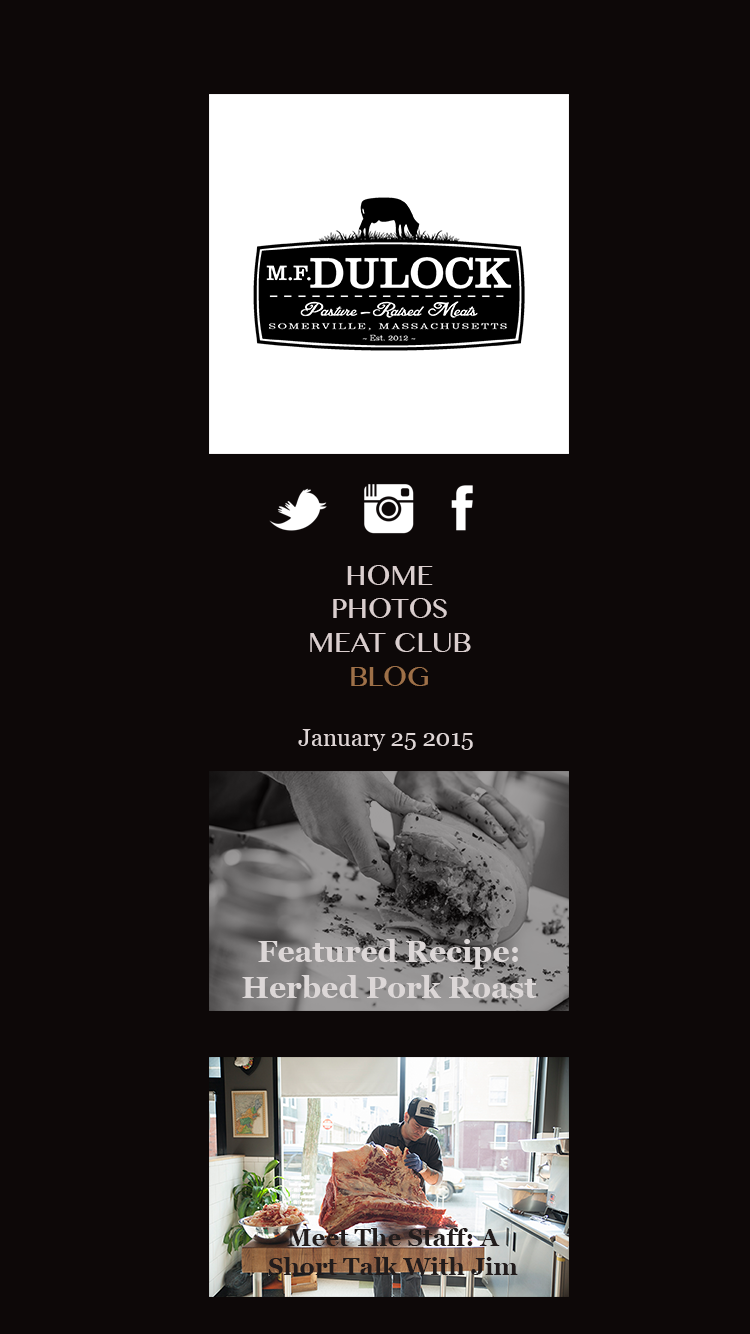
<style>
.page{position:relative;width:750px;height:1334px;background:#0d0808}
.page>*{position:absolute;margin:0}
.t1{font:28px "LaoMN";color:#dacece}
.t2{font:28px "LaoMN";color:#9e7048}
.t3{font:24px "Georgia";color:#ded5d5}
.t4{font:30px "Georgia-Bold";color:#dcd7d7}
.t5{font:24px "Georgia-Bold";color:#221c1c}
</style>
<div class="page">
<p class="t1" style="left:310px;top:565px;width:161px;height:121px;text-align:center">HOME<br>PHOTOS<br>MEAT CLUB<br><span class="t2">BLOG</span></p>
<p class="t3" style="left:298px;top:729px;width:175px;height:22px">January 25 2015</p>
<p class="t4" style="left:242px;top:939px;width:295px;height:59px;text-align:center">Featured Recipe: Herbed Pork Roast<br>Featured Recipe: Herbed Pork Roast</p>
<p class="t5" style="left:268px;top:1228px;width:250px;height:47px;text-align:center">Meet The Staff: A Short Talk With Jim</p>
</div>
